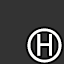
<style>
.page{position:relative;width:64px;height:64px;background:#333333}
.page>*{position:absolute;margin:0}
.t1{font:79px "SegoeUISymbol";color:#fffffe;font-weight:bold}
.t2{font:55px "Gidole-Regular";color:#fffffe;font-weight:bold}
</style>
<div class="page">
<p class="t1" style="left:27px;top:28px;width:35px;height:35px">⃝ <span class="t2">H</span></p>
</div>
